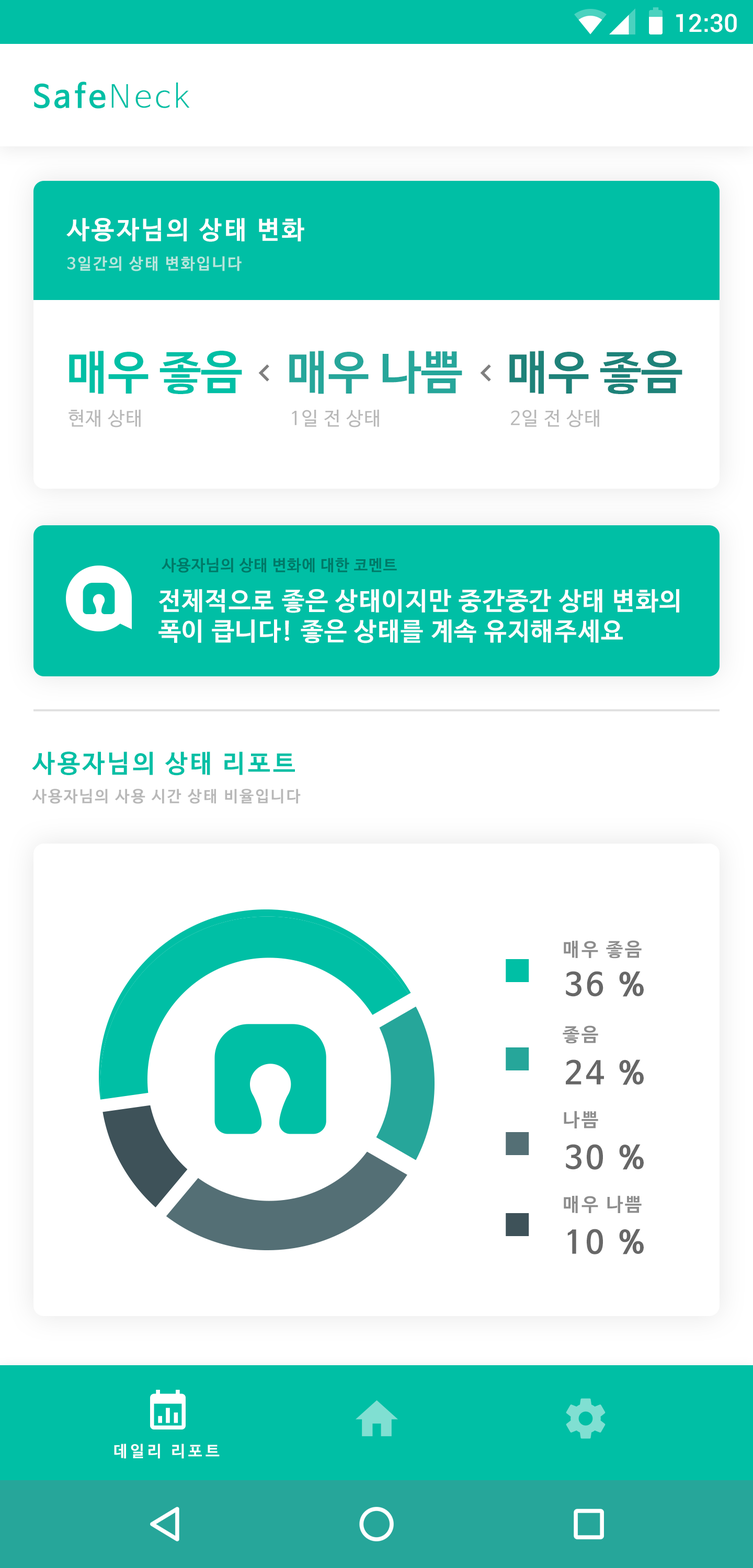
<style>
.page{position:relative;width:753px;height:1568px;background:#ffffff}
.page>*{position:absolute;margin:0}
.t1{font:25.1px "Roboto-Medium";color:#ffffff}
.t2{font:31.4px "NanumBarunGothicBold";letter-spacing:0.1em;color:#00bfa5}
.t3{font:31.4px "NanumBarunGothicLight";letter-spacing:0.1em;color:#00bfa5}
.t4{font:25.1px "NanumBarunGothicBold";letter-spacing:0.1em;color:#ffffff}
.t5{font:15.7px "NanumBarunGothicBold";letter-spacing:0.1em;color:#b7e6dd}
.t6{font:46.4px "NanumBarunGothicBold";color:#00bfa5}
.t7{font:46.4px "NanumBarunGothicBold";color:#26a69a}
.t8{font:46.4px "NanumBarunGothicBold";color:#1e8279}
.t9{font:18.8px "NanumBarunGothic";letter-spacing:0.04em;color:#b8b8b8}
.t10{font:15.7px "NanumBarunGothicBold";letter-spacing:0.04em;color:#007967}
.t11{font:25.1px "NanumBarunGothicBold";letter-spacing:0.04em;color:#fefefe}
.t12{font:25.1px "NanumBarunGothicBold";letter-spacing:0.1em;color:#00bfa5}
.t13{font:15.7px "NanumBarunGothicBold";letter-spacing:0.1em;color:#b8b8b8}
.t14{font:18.8px "NanumBarunGothicBold";letter-spacing:0.1em;color:#8d8d8d}
.t15{font:31.4px "NanumBarunGothicBold";letter-spacing:0.1em;color:#676767}
.t16{font:15.6px "NanumBarunGothicBold";letter-spacing:0.2em;color:#fffefe}
</style>
<div class="page">
<p class="t1" style="left:676px;top:14px;width:60px;height:18px">12:30</p>
<p class="t2" style="left:34px;top:82px;width:156px;height:27px">Safe<span class="t3">Neck</span></p>
<p class="t4" style="left:66px;top:218px;width:238px;height:24px">사용자님의 상태 변화</p>
<p class="t5" style="left:67px;top:256px;width:174px;height:15px">3일간의 상태 변화입니다</p>
<p class="t6" style="left:69px;top:351px;width:173px;height:43px">매우 좋음</p>
<p class="t7" style="left:289px;top:351px;width:173px;height:43px">매우 나쁨</p>
<p class="t8" style="left:509px;top:351px;width:173px;height:43px">매우 좋음</p>
<p class="t9" style="left:68px;top:409px;width:73px;height:19px">현재 상태</p>
<p class="t9" style="left:292px;top:409px;width:87px;height:19px">1일 전 상태</p>
<p class="t9" style="left:511px;top:409px;width:88px;height:19px">2일 전 상태</p>
<p class="t10" style="left:162px;top:558px;width:235px;height:15px">사용자님의 상태 변화에 대한 코멘트</p>
<p class="t11" style="left:158px;top:589px;width:521px;height:54px">전체적으로 좋은 상태이지만 중간중간 상태 변화의<br>폭이 큽니다! 좋은 상태를 계속 유지해주세요</p>
<p class="t12" style="left:32px;top:752px;width:263px;height:24px">사용자님의 상태 리포트</p>
<p class="t13" style="left:32px;top:789px;width:269px;height:15px">사용자님의 사용 시간 상태 비율입니다</p>
<p class="t14" style="left:563px;top:940px;width:78px;height:19px">매우 좋음</p>
<p class="t15" style="left:566px;top:971px;width:77px;height:26px">36 %</p>
<p class="t14" style="left:562px;top:1025px;width:36px;height:19px">좋음</p>
<p class="t15" style="left:566px;top:1059px;width:77px;height:26px">24 %</p>
<p class="t14" style="left:563px;top:1111px;width:35px;height:17px">나쁨</p>
<p class="t15" style="left:566px;top:1144px;width:77px;height:26px">30 %</p>
<p class="t14" style="left:563px;top:1195px;width:78px;height:18px">매우 나쁨</p>
<p class="t15" style="left:567px;top:1229px;width:76px;height:25px">10 %</p>
<p class="t16" style="left:114px;top:1444px;width:106px;height:15px">데일리 리포트</p>
</div>
